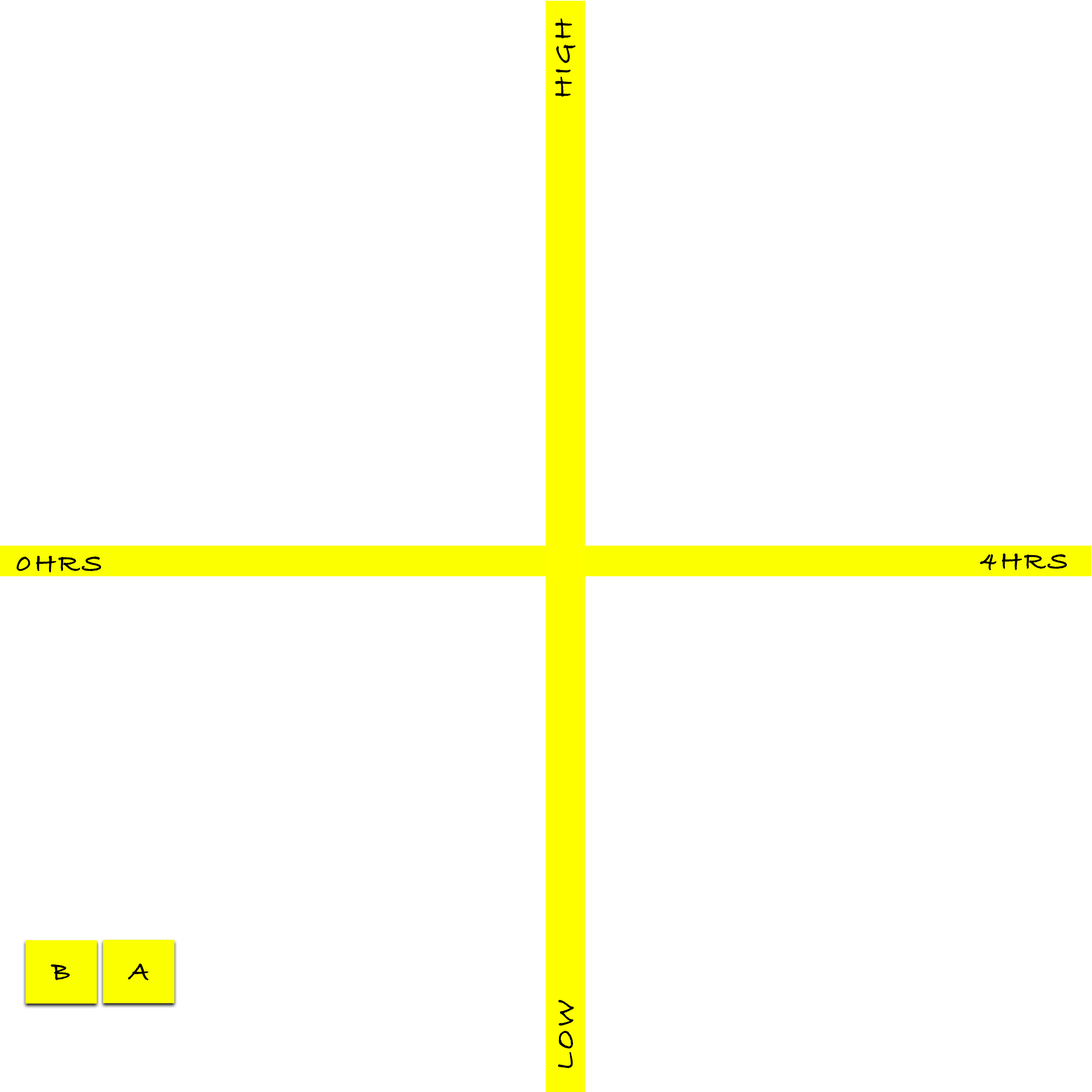
<style>
.page{position:relative;width:1092px;height:1092px;background:#ffffff}
.page>*{position:absolute;margin:0}
.t1{font:27.6px "BradleyHandITCTT-Bold";letter-spacing:0.12em;color:#000000;text-transform:uppercase}
</style>
<div class="page">
<p class="t1" style="left:555px;top:18px;width:20px;height:79px;rotate:-90deg">high</p>
<p class="t1" style="left:16px;top:555px;width:85px;height:18px">0HRS</p>
<p class="t1" style="left:980px;top:553px;width:87px;height:17px">4hrs</p>
<p class="t1" style="left:51px;top:964px;width:19px;height:16px">B</p>
<p class="t1" style="left:128px;top:963px;width:21px;height:18px">A</p>
<p class="t1" style="left:558px;top:1000px;width:16px;height:68px;rotate:-90deg">low</p>
</div>
